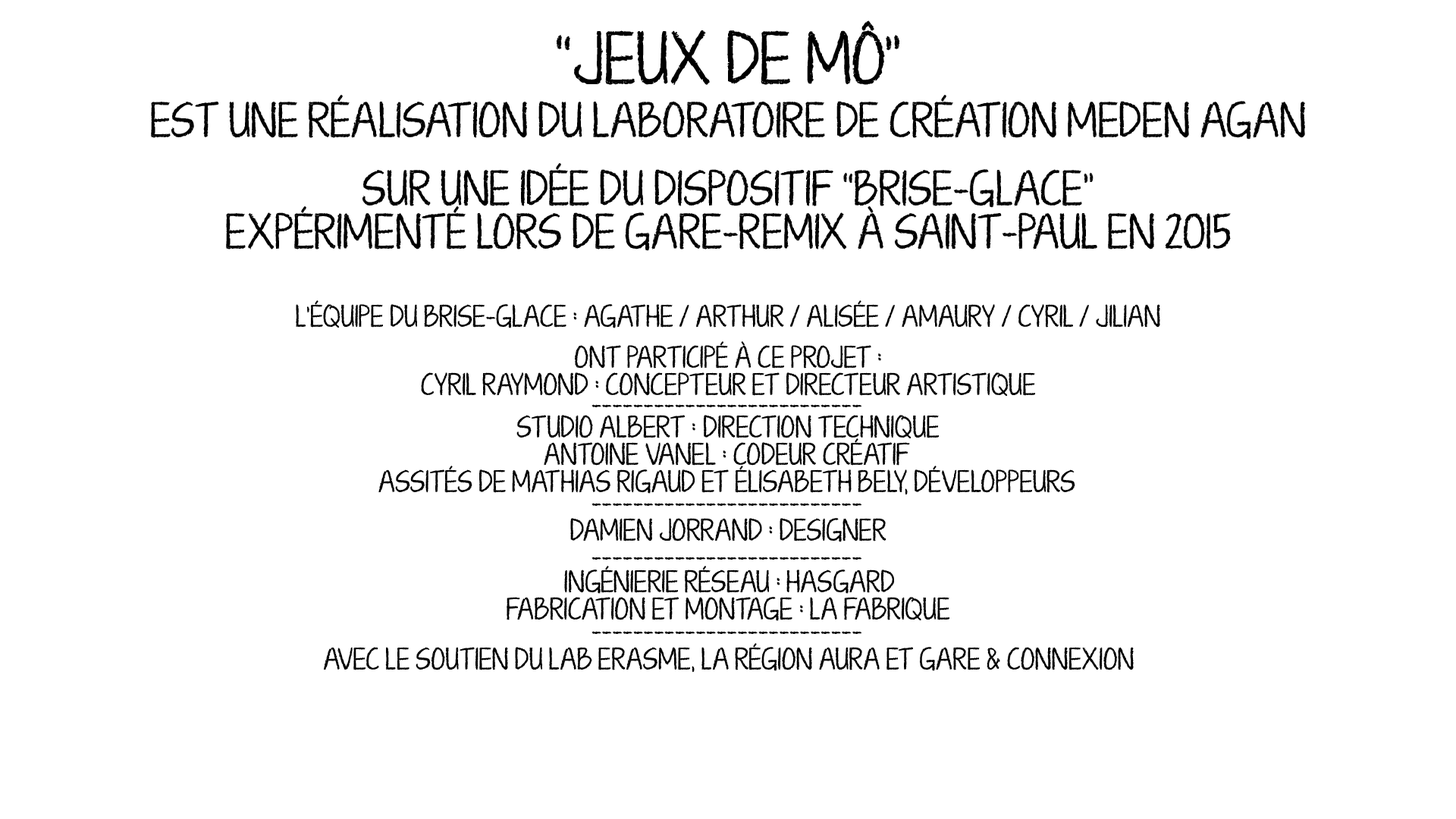
<style>
.page{position:relative;width:1456px;height:819px;background:#ffffff}
.page>*{position:absolute;margin:0}
.t1{font:54.6px "KGTenThousandReasons";color:#000000}
.t2{font:36.4px "KGTenThousandReasons";color:#000000}
.t3{font:22.8px "KGTenThousandReasons";color:#000000}
</style>
<div class="page">
<p class="t1" style="left:557px;top:20px;width:342px;height:65px">“JEUX DE MÔ”</p>
<p class="t2" style="left:151px;top:95px;width:1154px;height:45px">EST UNE RÉALISATION DU LABORATOIRE DE CRÉATION MEDEN AGAN</p>
<p class="t2" style="left:226px;top:163px;width:1005px;height:88px;text-align:center">SUR UNE IDÉE DU DISPOSITIF “BRISE-GLACE”<br>EXPÉRIMENTÉ LORS DE GARE-REMIX À SAINT-PAUL EN 2015</p>
<p class="t3" style="left:296px;top:300px;width:864px;height:28px">L’ÉQUIPE DU BRISE-GLACE : AGATHE / ARTHUR / ALISÉE / AMAURY / CYRIL / JILIAN</p>
<p class="t3" style="left:421px;top:341px;width:614px;height:55px;text-align:center">ONT PARTICIPÉ À CE PROJET :<br>CYRIL RAYMOND : CONCEPTEUR ET DIRECTEUR ARTISTIQUE</p>
<p class="t3" style="left:591px;top:404px;width:271px;height:3px">--------------------------</p>
<p class="t3" style="left:378px;top:415px;width:697px;height:80px;text-align:center">STUDIO ALBERT : DIRECTION TECHNIQUE<br>ANTOINE VANEL : CODEUR CRÉATIF<br>ASSITÉS DE MATHIAS RIGAUD ET ÉLISABETH BELY, DÉVELOPPEURS</p>
<p class="t3" style="left:591px;top:503px;width:271px;height:3px">--------------------------</p>
<p class="t3" style="left:570px;top:518px;width:316px;height:24px">DAMIEN JORRAND : DESIGNER</p>
<p class="t3" style="left:591px;top:557px;width:271px;height:3px">--------------------------</p>
<p class="t3" style="left:507px;top:566px;width:442px;height:55px;text-align:center">INGÉNIERIE RÉSEAU : HASGARD<br>FABRICATION ET MONTAGE : LA FABRIQUE</p>
<p class="t3" style="left:591px;top:631px;width:271px;height:3px">--------------------------</p>
<p class="t3" style="left:323px;top:643px;width:811px;height:30px">AVEC LE SOUTIEN DU LAB ERASME, LA RÉGION AURA ET GARE &amp; CONNEXION</p>
</div>
